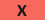
<style>
.page{position:relative;width:45px;height:20px;background:#f7685d}
.page>*{position:absolute;margin:0}
.t1{font:18px "Calibri-Bold";color:#181616}
</style>
<div class="page">
<p class="t1" style="left:17px;top:5px;width:10px;height:11px">X</p>
</div>
